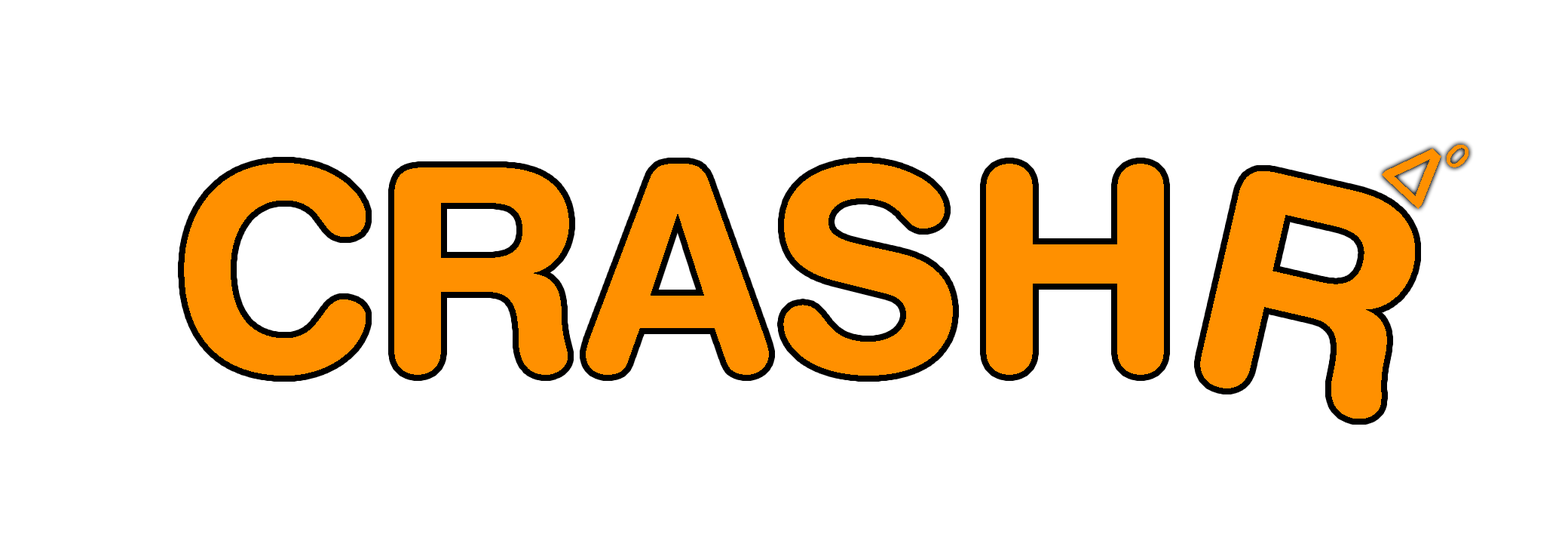
<style>
.page{position:relative;width:1568px;height:537px;background:#ffffff}
.page>*{position:absolute;margin:0}
.t1{font:75.4px "HelveticaRoundedLTStd-Bd";color:#ff9000}
.t2{font:62.8px "MyriadPro-Regular";color:#ff9000}
.t3{font:282.7px "HelveticaRoundedLTStd-Bd";color:#ff9000}
.t4{font:301.5px "HelveticaRoundedLTStd-Bd";color:#ff9000}
</style>
<div class="page">
<p class="t1" style="left:1382px;top:149px;width:59px;height:60px;rotate:43deg">∆</p>
<p class="t2" style="left:1447px;top:145px;width:21px;height:22px;rotate:43deg">⁰</p>
<p class="t3" style="left:184px;top:163px;width:980px;height:212px">CRASH</p>
<p class="t4" style="left:1200px;top:171px;width:215px;height:247px;rotate:13deg">R</p>
</div>
